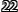
<style>
.page{position:relative;width:18px;height:12px;background:#ffffff}
.page>*{position:absolute;margin:0}
.t1{font:17px "Perpetua-Bold";color:#ffffff}
</style>
<div class="page">
<p class="t1" style="left:2px;top:1px;width:15px;height:10px">22</p>
</div>
